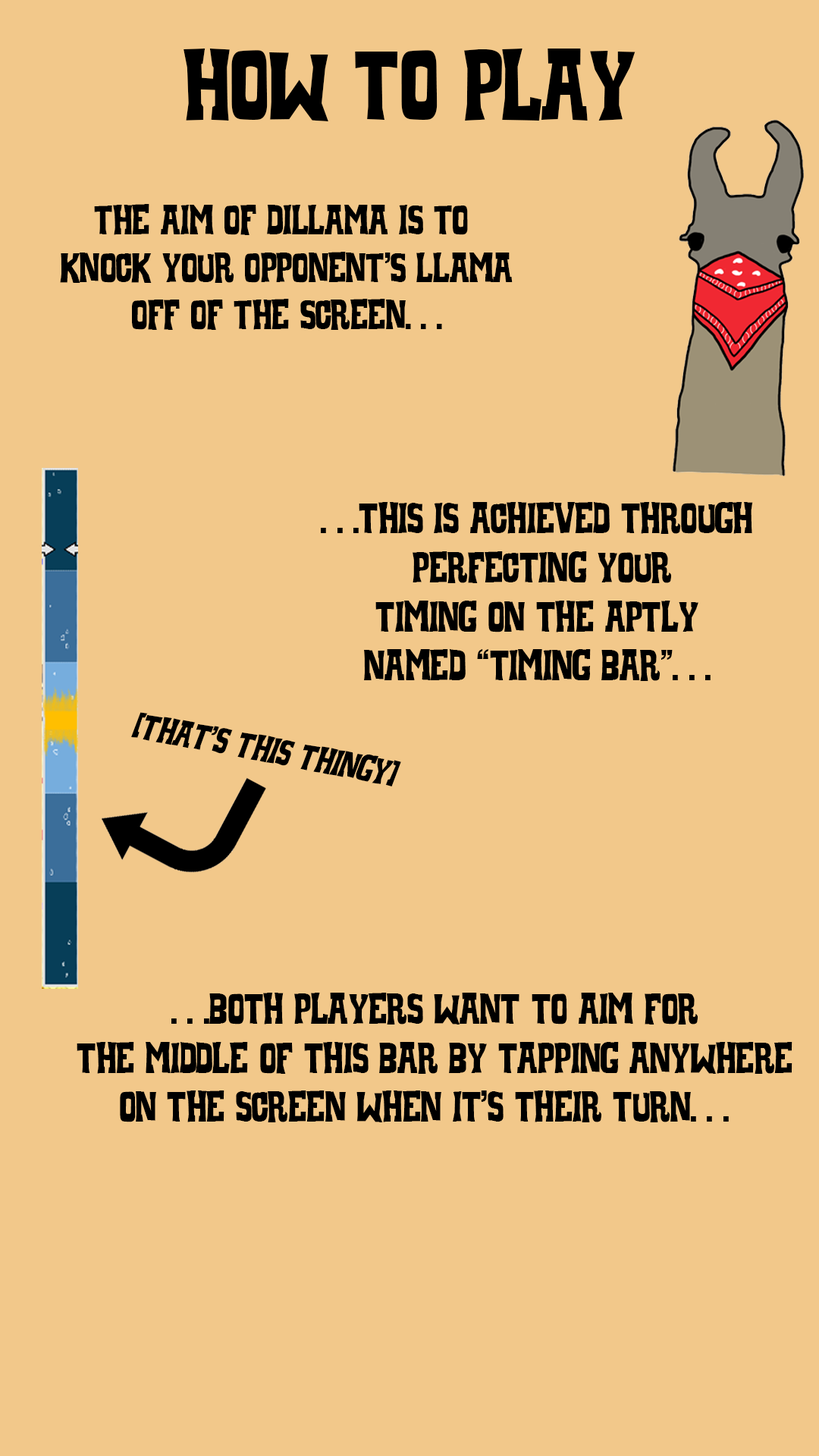
<style>
.page{position:relative;width:819px;height:1456px;background:#f2c88a}
.page>*{position:absolute;margin:0}
.t1{font:94.8px "WhiskeyTown-Sober";color:#000000}
.t2{font:39.4px "WhiskeyTown-Sober";color:#000000}
.t3{font:40.9px "WhiskeyTown-Sober";color:#000000}
.t4{font:34.9px "WhiskeyTown-Sober";color:#000000;font-style:italic}
</style>
<div class="page">
<p class="t1" style="left:184px;top:49px;width:451px;height:72px">How to Play</p>
<p class="t2" style="left:60px;top:204px;width:453px;height:126px;text-align:center">The aim of dillama is to<br> knock your opponent's llama<br> off of the screen. . .</p>
<p class="t3" style="left:321px;top:502px;width:432px;height:179px;text-align:center">. . .This is achieved through<br> perfecting your<br>Timing on the aptly<br> named “timing bar”. . .</p>
<p class="t4" style="left:131px;top:712px;width:270px;height:75px;rotate:11deg">(That's this thingy)</p>
<p class="t3" style="left:77px;top:993px;width:715px;height:129px;text-align:center">. . .Both players Want to aim for<br>The middle of this bar by tapping anywhere<br>on the screen when it's their turn. . .</p>
</div>
